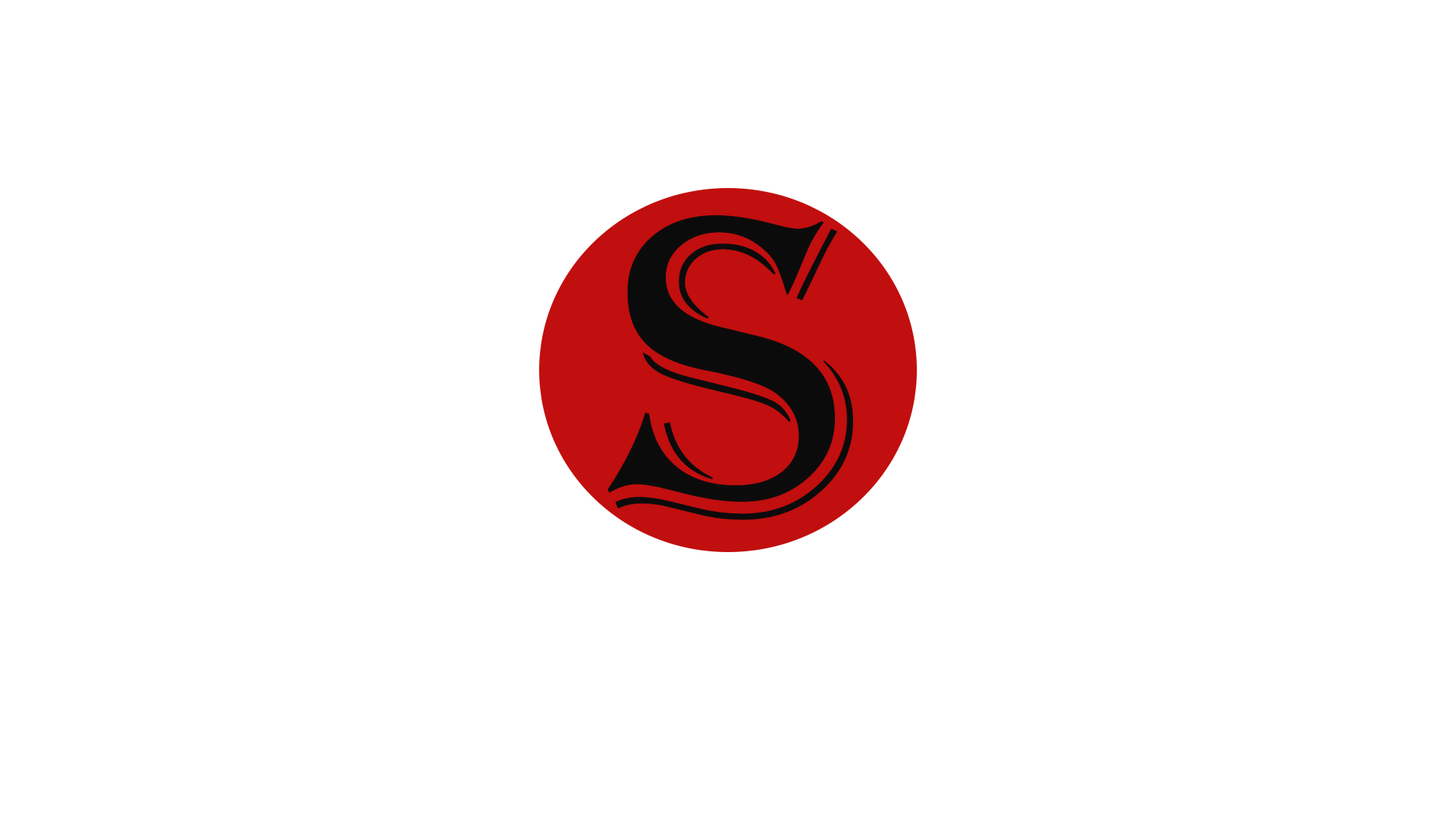
<style>
.page{position:relative;width:1456px;height:819px;background:#ffffff}
.page>*{position:absolute;margin:0}
.t1{font:442.4px "Algerian";color:#0c0b0b}
</style>
<div class="page">
<p class="t1" style="left:607px;top:215px;width:246px;height:305px">s</p>
</div>
